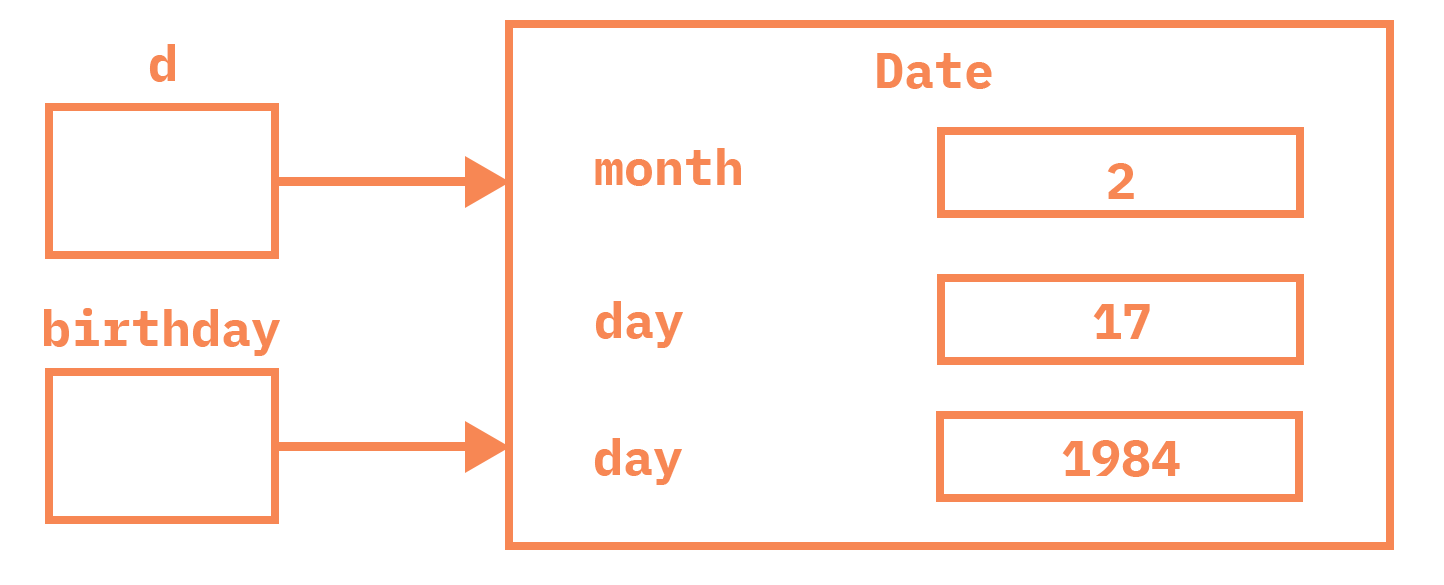
<style>
.page{position:relative;width:1444px;height:585px;background:#ffffff}
.page>*{position:absolute;margin:0}
.t1{font:50px "IBMPlexMono-Bold";color:#f78754}
</style>
<div class="page">
<p class="t1" style="left:149px;top:44px;width:26px;height:38px">d</p>
<p class="t1" style="left:877px;top:53px;width:115px;height:36px">Date</p>
<p class="t1" style="left:595px;top:148px;width:146px;height:38px">month</p>
<p class="t1" style="left:1107px;top:163px;width:27px;height:36px">2</p>
<p class="t1" style="left:595px;top:301px;width:88px;height:47px">day</p>
<p class="t1" style="left:1093px;top:304px;width:57px;height:35px">17</p>
<p class="t1" style="left:44px;top:308px;width:236px;height:48px">birthday</p>
<p class="t1" style="left:594px;top:438px;width:88px;height:47px">day</p>
<p class="t1" style="left:1062px;top:440px;width:118px;height:37px">1984</p>
</div>
